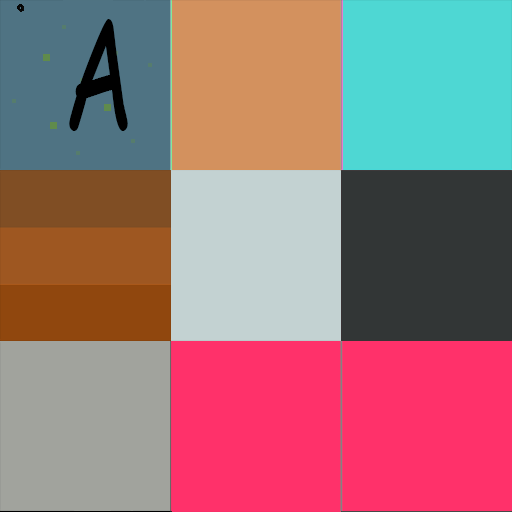
<style>
.page{position:relative;width:512px;height:512px;background:#ff316a}
.page>*{position:absolute;margin:0}
.t1{font:152.6px "ComicSansMS";color:#000000;scale:0.64 1}
</style>
<div class="page">
<p class="t1" style="left:69px;top:19px;width:59px;height:112px">A</p>
</div>
